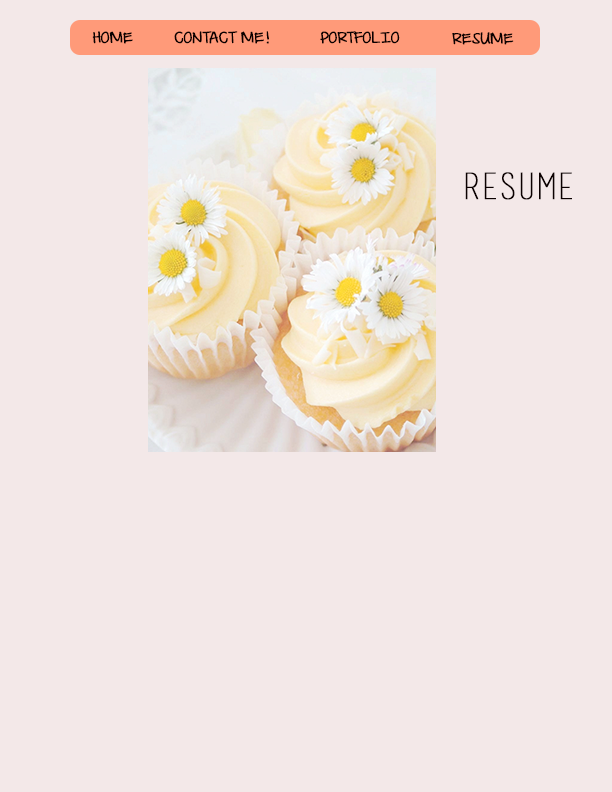
<style>
.page{position:relative;width:612px;height:792px;background:#f3e8e8}
.page>*{position:absolute;margin:0}
.t1{font:14px "DJBILoveMeSomeAly";color:#0b0000;text-transform:uppercase;font-weight:bold}
.t2{font:36px "basictitlefont";color:#0b0000;text-transform:uppercase;font-weight:bold}
</style>
<div class="page">
<p class="t1" style="left:92px;top:31px;width:41px;height:13px">home</p>
<p class="t1" style="left:174px;top:31px;width:95px;height:13px">contact me!</p>
<p class="t1" style="left:320px;top:31px;width:80px;height:13px">portfolio</p>
<p class="t1" style="left:452px;top:32px;width:62px;height:13px">resume</p>
<p class="t2" style="left:465px;top:172px;width:107px;height:28px">resume</p>
</div>
